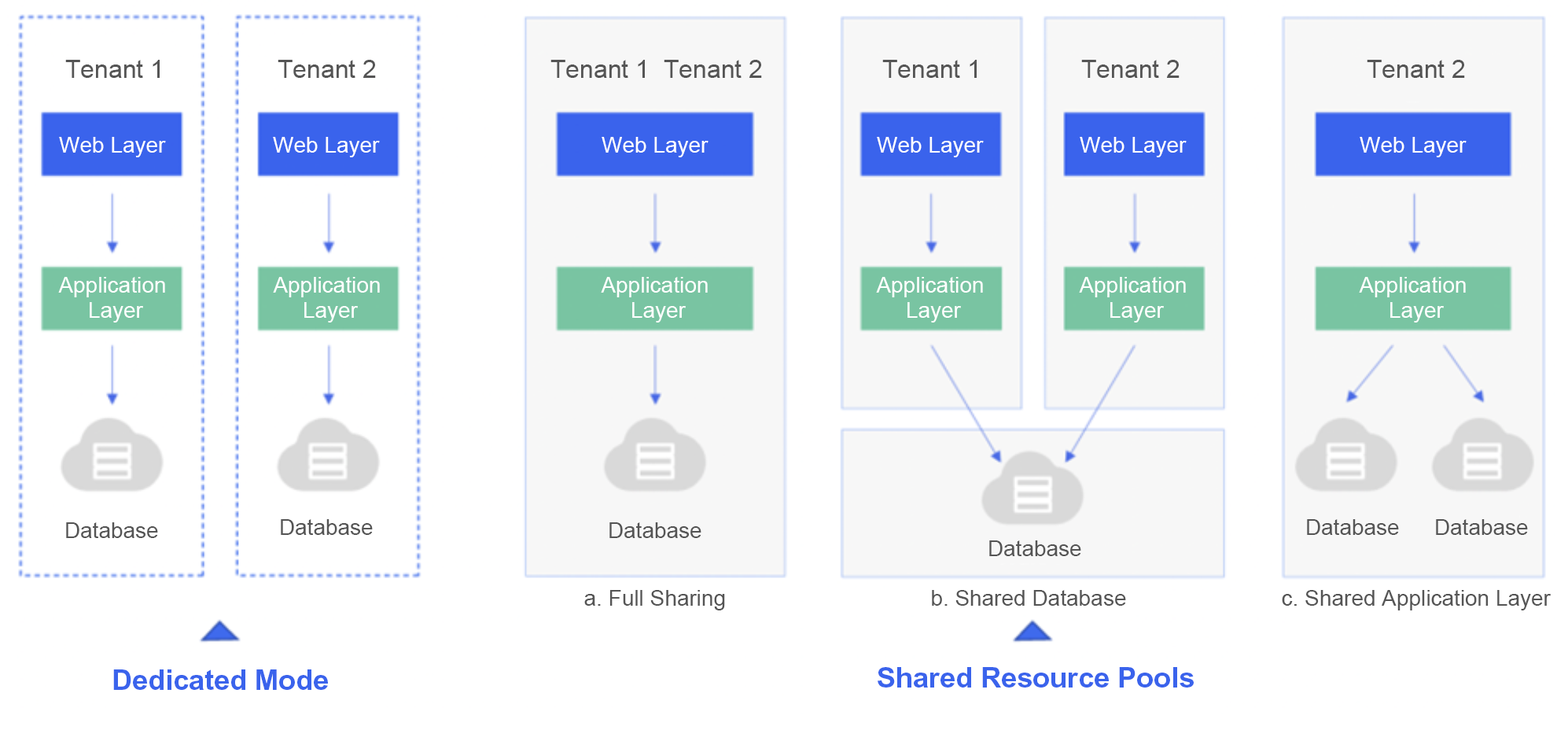
<style>
.page{position:relative;width:1568px;height:730px;background:#ffffff}
.page>*{position:absolute;margin:0}
.t1{font:25.2px "ArialMT";color:#555555}
.t2{font:22px "ArialMT";color:#ffffff}
.t3{font:22px/25.2px "ArialMT";color:#ffffff}
.t4{font:22px "ArialMT";color:#555555}
.t5{font:28.3px "Arial-BoldMT";color:#3a63ec}
</style>
<div class="page">
<p class="t1" style="left:65px;top:60px;width:95px;height:18px">Tenant 1</p>
<p class="t1" style="left:278px;top:60px;width:98px;height:18px">Tenant 2</p>
<p class="t1" style="left:550px;top:60px;width:95px;height:18px">Tenant 1</p>
<p class="t1" style="left:664px;top:60px;width:98px;height:18px">Tenant 2</p>
<p class="t1" style="left:882px;top:60px;width:95px;height:18px">Tenant 1</p>
<p class="t1" style="left:1081px;top:60px;width:99px;height:18px">Tenant 2</p>
<p class="t1" style="left:1367px;top:60px;width:98px;height:18px">Tenant 2</p>
<p class="t2" style="left:59px;top:137px;width:107px;height:20px">Web Layer</p>
<p class="t2" style="left:273px;top:137px;width:107px;height:20px">Web Layer</p>
<p class="t2" style="left:602px;top:137px;width:107px;height:20px">Web Layer</p>
<p class="t2" style="left:877px;top:137px;width:107px;height:20px">Web Layer</p>
<p class="t2" style="left:1080px;top:137px;width:107px;height:20px">Web Layer</p>
<p class="t2" style="left:1360px;top:137px;width:107px;height:20px">Web Layer</p>
<p class="t3" style="left:58px;top:277px;width:107px;height:45px;text-align:center">Application <br>Layer</p>
<p class="t3" style="left:273px;top:277px;width:107px;height:45px;text-align:center">Application <br>Layer</p>
<p class="t3" style="left:601px;top:277px;width:107px;height:45px;text-align:center">Application <br>Layer</p>
<p class="t3" style="left:876px;top:277px;width:107px;height:45px;text-align:center">Application <br>Layer</p>
<p class="t3" style="left:1079px;top:277px;width:107px;height:45px;text-align:center">Application <br>Layer</p>
<p class="t3" style="left:1359px;top:277px;width:107px;height:45px;text-align:center">Application <br>Layer</p>
<p class="t4" style="left:281px;top:519px;width:92px;height:16px">Database</p>
<p class="t4" style="left:1307px;top:519px;width:92px;height:16px">Database</p>
<p class="t4" style="left:1436px;top:519px;width:92px;height:16px">Database</p>
<p class="t4" style="left:66px;top:522px;width:92px;height:16px">Database</p>
<p class="t4" style="left:609px;top:522px;width:92px;height:16px">Database</p>
<p class="t4" style="left:989px;top:540px;width:92px;height:16px">Database</p>
<p class="t4" style="left:584px;top:590px;width:141px;height:20px">a. Full Sharing</p>
<p class="t4" style="left:932px;top:590px;width:194px;height:15px">b. Shared Database</p>
<p class="t4" style="left:1282px;top:590px;width:269px;height:20px">c. Shared Application Layer</p>
<p class="t5" style="left:113px;top:669px;width:215px;height:21px">Dedicated Mode</p>
<p class="t5" style="left:878px;top:667px;width:316px;height:20px">Shared Resource Pools</p>
</div>
